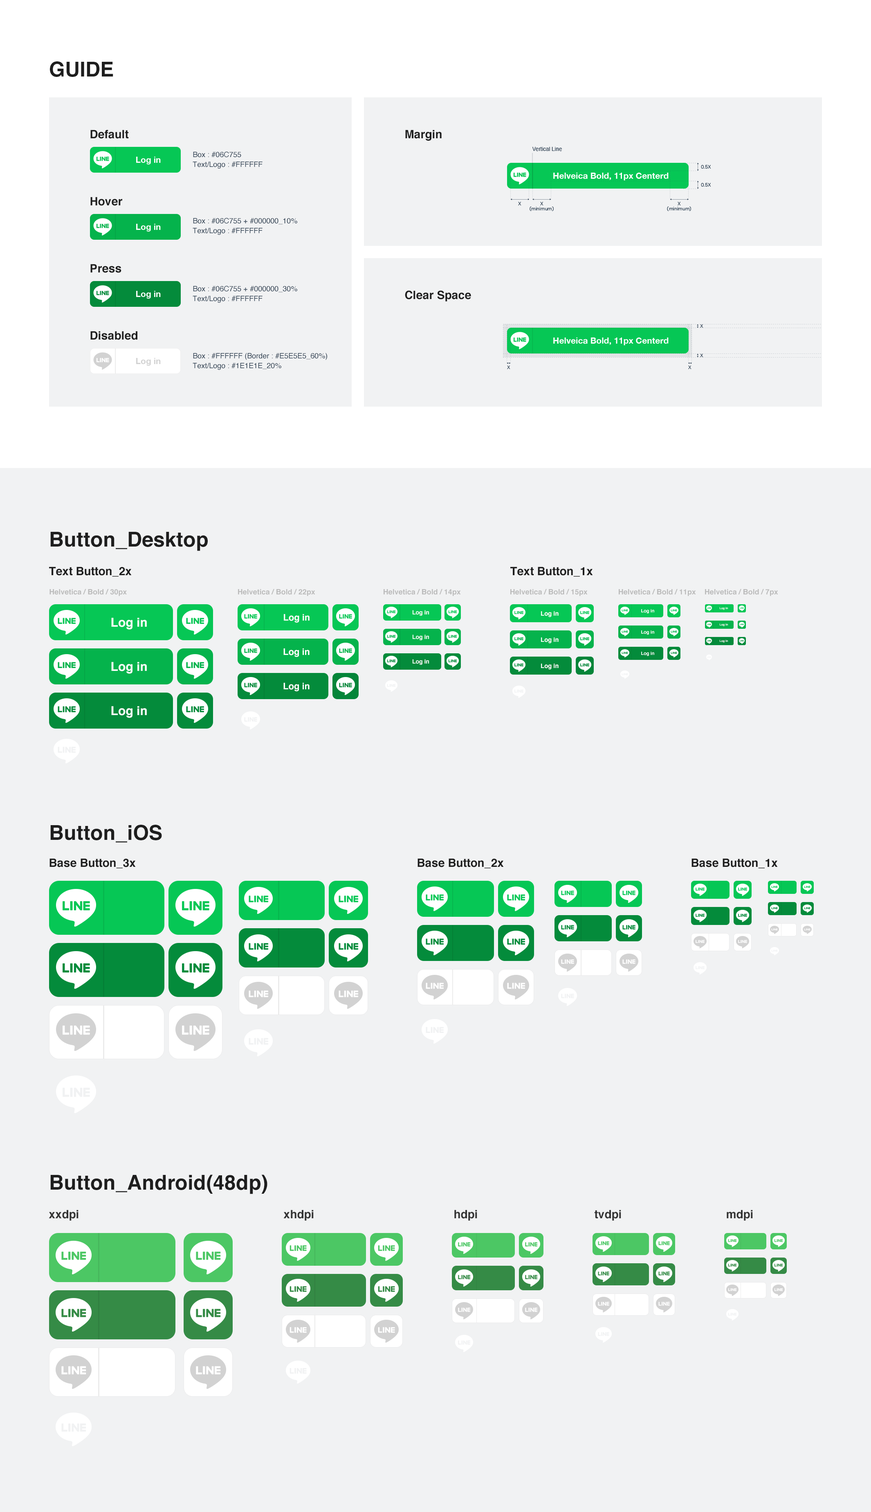
<style>
.page{position:relative;width:871px;height:1512px;background:#f1f2f3}
.page>*{position:absolute;margin:0}
.t1{font:20.5px "Helvetica-Bold";color:#1e1e1e}
.t2{font:11.5px "Helvetica-Bold";color:#1e1e1e}
.t3{font:7.4px/9.8px "Helvetica";color:#2c3e50}
.t4{font:7.4px "Helvetica-Bold";color:#bbbbbb}
.t5{font:12.3px "Helvetica-Bold";color:#ffffff}
.t6{font:9px "Helvetica-Bold";color:#ffffff}
.t7{font:5.7px "Helvetica-Bold";color:#ffffff}
.t8{font:6.1px "Helvetica-Bold";color:#ffffff}
.t9{font:4.5px "Helvetica-Bold";color:#ffffff}
.t10{font:2.9px "Helvetica-Bold";color:#ffffff}
.t11{font:11.5px "Helvetica-Bold";color:#333333}
</style>
<div class="page">
<p class="t1" style="left:50px;top:61px;width:63px;height:16px">GUIDE</p>
<p class="t2" style="left:90px;top:130px;width:39px;height:9px">Default</p>
<p class="t2" style="left:405px;top:130px;width:37px;height:11px">Margin</p>
<p class="t3" style="left:193px;top:151px;width:70px;height:18px">Box : #06C755<br>Text/Logo : #FFFFFF</p>
<p class="t2" style="left:90px;top:197px;width:32px;height:9px">Hover</p>
<p class="t3" style="left:193px;top:218px;width:104px;height:17px">Box : #06C755 + #000000_10%<br>Text/Logo : #FFFFFF</p>
<p class="t2" style="left:90px;top:264px;width:32px;height:9px">Press</p>
<p class="t3" style="left:193px;top:286px;width:104px;height:17px">Box : #06C755 + #000000_30%<br>Text/Logo : #FFFFFF</p>
<p class="t2" style="left:405px;top:290px;width:66px;height:12px">Clear Space</p>
<p class="t2" style="left:90px;top:331px;width:47px;height:9px">Disabled</p>
<p class="t3" style="left:193px;top:353px;width:134px;height:17px">Box : #FFFFFF (Border : #E5E5E5_60%<br>)<br>Text/Logo : #1E1E1E_20%</p>
<p class="t1" style="left:50px;top:532px;width:158px;height:19px">Button_Desktop</p>
<p class="t2" style="left:49px;top:567px;width:83px;height:10px">Text Button_2x</p>
<p class="t2" style="left:511px;top:567px;width:82px;height:10px">Text Button_1x</p>
<p class="t4" style="left:50px;top:589px;width:77px;height:7px">Helvetica / Bold / 30px</p>
<p class="t4" style="left:238px;top:589px;width:77px;height:7px">Helvetica / Bold / 22px</p>
<p class="t4" style="left:384px;top:589px;width:77px;height:7px">Helvetica / Bold / 14px</p>
<p class="t4" style="left:511px;top:589px;width:77px;height:7px">Helvetica / Bold / 15px</p>
<p class="t4" style="left:619px;top:589px;width:77px;height:7px">Helvetica / Bold / 11px</p>
<p class="t4" style="left:705px;top:589px;width:73px;height:7px">Helvetica / Bold / 7px</p>
<p class="t5" style="left:111px;top:618px;width:36px;height:12px">Log in</p>
<p class="t6" style="left:284px;top:614px;width:26px;height:9px">Log in</p>
<p class="t7" style="left:413px;top:610px;width:16px;height:6px">Log in</p>
<p class="t8" style="left:541px;top:611px;width:18px;height:6px">Log in</p>
<p class="t9" style="left:641px;top:609px;width:14px;height:5px">Log in</p>
<p class="t10" style="left:720px;top:607px;width:8px;height:3px">Log in</p>
<p class="t10" style="left:720px;top:623px;width:8px;height:3px">Log in</p>
<p class="t7" style="left:413px;top:634px;width:16px;height:6px">Log in</p>
<p class="t8" style="left:541px;top:637px;width:18px;height:7px">Log in</p>
<p class="t9" style="left:641px;top:630px;width:14px;height:5px">Log in</p>
<p class="t10" style="left:720px;top:640px;width:8px;height:3px">Log in</p>
<p class="t6" style="left:284px;top:648px;width:26px;height:9px">Log in</p>
<p class="t9" style="left:641px;top:652px;width:14px;height:4px">Log in</p>
<p class="t5" style="left:111px;top:662px;width:36px;height:12px">Log in</p>
<p class="t7" style="left:413px;top:659px;width:16px;height:6px">Log in</p>
<p class="t8" style="left:541px;top:664px;width:18px;height:6px">Log in</p>
<p class="t6" style="left:284px;top:683px;width:26px;height:8px">Log in</p>
<p class="t5" style="left:111px;top:706px;width:36px;height:12px">Log in</p>
<p class="t1" style="left:50px;top:825px;width:112px;height:18px">Button_iOS</p>
<p class="t2" style="left:50px;top:858px;width:86px;height:10px">Base Button_3x</p>
<p class="t2" style="left:418px;top:858px;width:86px;height:10px">Base Button_2x</p>
<p class="t2" style="left:692px;top:858px;width:86px;height:10px">Base Button_1x</p>
<p class="t1" style="left:50px;top:1174px;width:218px;height:20px">Button_Android(48dp)</p>
<p class="t11" style="left:49px;top:1210px;width:30px;height:11px">xxdpi</p>
<p class="t11" style="left:284px;top:1210px;width:30px;height:11px">xhdpi</p>
<p class="t11" style="left:454px;top:1210px;width:23px;height:11px">hdpi</p>
<p class="t11" style="left:594px;top:1210px;width:27px;height:11px">tvdpi</p>
<p class="t11" style="left:727px;top:1210px;width:26px;height:11px">mdpi</p>
</div>
